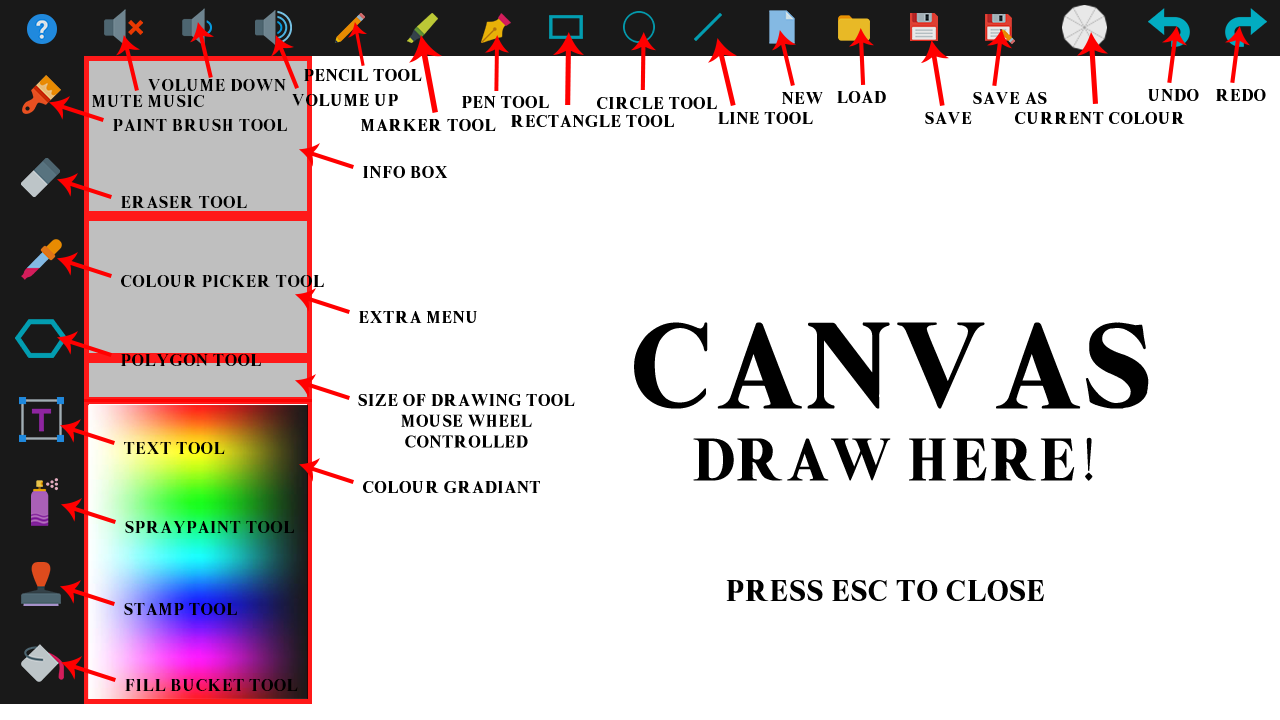
<style>
.page{position:relative;width:1280px;height:720px;background:#ffffff}
.page>*{position:absolute;margin:0}
.t1{font:17.3px "SuperSmash4.1";color:#000000}
.t2{font:60px "SuperSmash4.1";color:#000000}
.t3{font:122.5px "SuperSmash4.1";color:#000000}
.t4{font:30px "SuperSmash4.1";color:#000000}
</style>
<div class="page">
<p class="t1" style="left:304px;top:69px;width:118px;height:12px">pencil tool</p>
<p class="t1" style="left:148px;top:79px;width:138px;height:12px">volume down</p>
<p class="t1" style="left:1148px;top:89px;width:51px;height:12px">undo</p>
<p class="t1" style="left:1216px;top:89px;width:50px;height:12px">redo</p>
<p class="t1" style="left:92px;top:95px;width:112px;height:12px">mute music</p>
<p class="t1" style="left:292px;top:94px;width:106px;height:12px">volume up</p>
<p class="t1" style="left:462px;top:96px;width:87px;height:12px">pen tool</p>
<p class="t1" style="left:597px;top:97px;width:120px;height:12px">circle tool</p>
<p class="t1" style="left:782px;top:92px;width:41px;height:12px">new</p>
<p class="t1" style="left:837px;top:91px;width:49px;height:12px">load</p>
<p class="t1" style="left:973px;top:92px;width:74px;height:12px">save as</p>
<p class="t1" style="left:718px;top:112px;width:95px;height:12px">line tool</p>
<p class="t1" style="left:925px;top:112px;width:47px;height:12px">save</p>
<p class="t1" style="left:1015px;top:112px;width:170px;height:12px">current colour</p>
<p class="t1" style="left:113px;top:119px;width:174px;height:12px">Paint Brush Tool</p>
<p class="t1" style="left:361px;top:119px;width:135px;height:12px">marker tool</p>
<p class="t1" style="left:511px;top:115px;width:163px;height:12px">rectangle tool</p>
<p class="t1" style="left:363px;top:166px;width:85px;height:12px">info box</p>
<p class="t1" style="left:121px;top:196px;width:126px;height:12px">ERaser Tool</p>
<p class="t1" style="left:121px;top:275px;width:203px;height:12px">Colour picker tool</p>
<p class="t1" style="left:359px;top:311px;width:118px;height:12px">Extra menu</p>
<p class="t2" style="left:634px;top:322px;width:515px;height:159px;text-align:center"><span class="t3">CAnVAS<br></span>draw here!</p>
<p class="t1" style="left:121px;top:354px;width:140px;height:12px">Polygon tool</p>
<p class="t1" style="left:358px;top:394px;width:217px;height:54px;text-align:center">Size of drawing tool<br>mouse wheel <br>controlled</p>
<p class="t1" style="left:124px;top:442px;width:101px;height:12px">TEXT tool</p>
<p class="t1" style="left:363px;top:481px;width:177px;height:12px">Colour gradiant</p>
<p class="t1" style="left:125px;top:521px;width:169px;height:12px">spraypaint tool</p>
<p class="t4" style="left:726px;top:580px;width:318px;height:21px">press esc to close</p>
<p class="t1" style="left:124px;top:603px;width:113px;height:12px">Stamp tool</p>
<p class="t1" style="left:125px;top:679px;width:173px;height:12px">Fill bucket tool</p>
</div>
